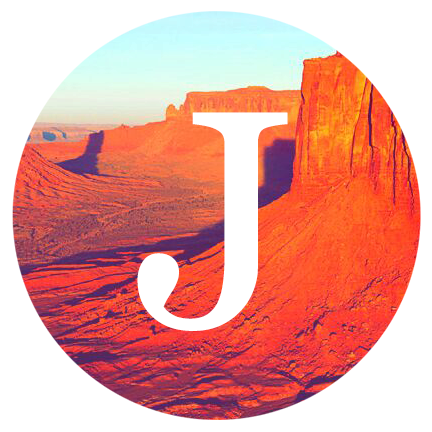
<style>
.page{position:relative;width:432px;height:432px;background:#ffffff}
.page>*{position:absolute;margin:0}
.t1{font:306.7px "Vani";color:#ffffff;font-weight:bold}
</style>
<div class="page">
<p class="t1" style="left:137px;top:112px;width:151px;height:219px">J</p>
</div>
